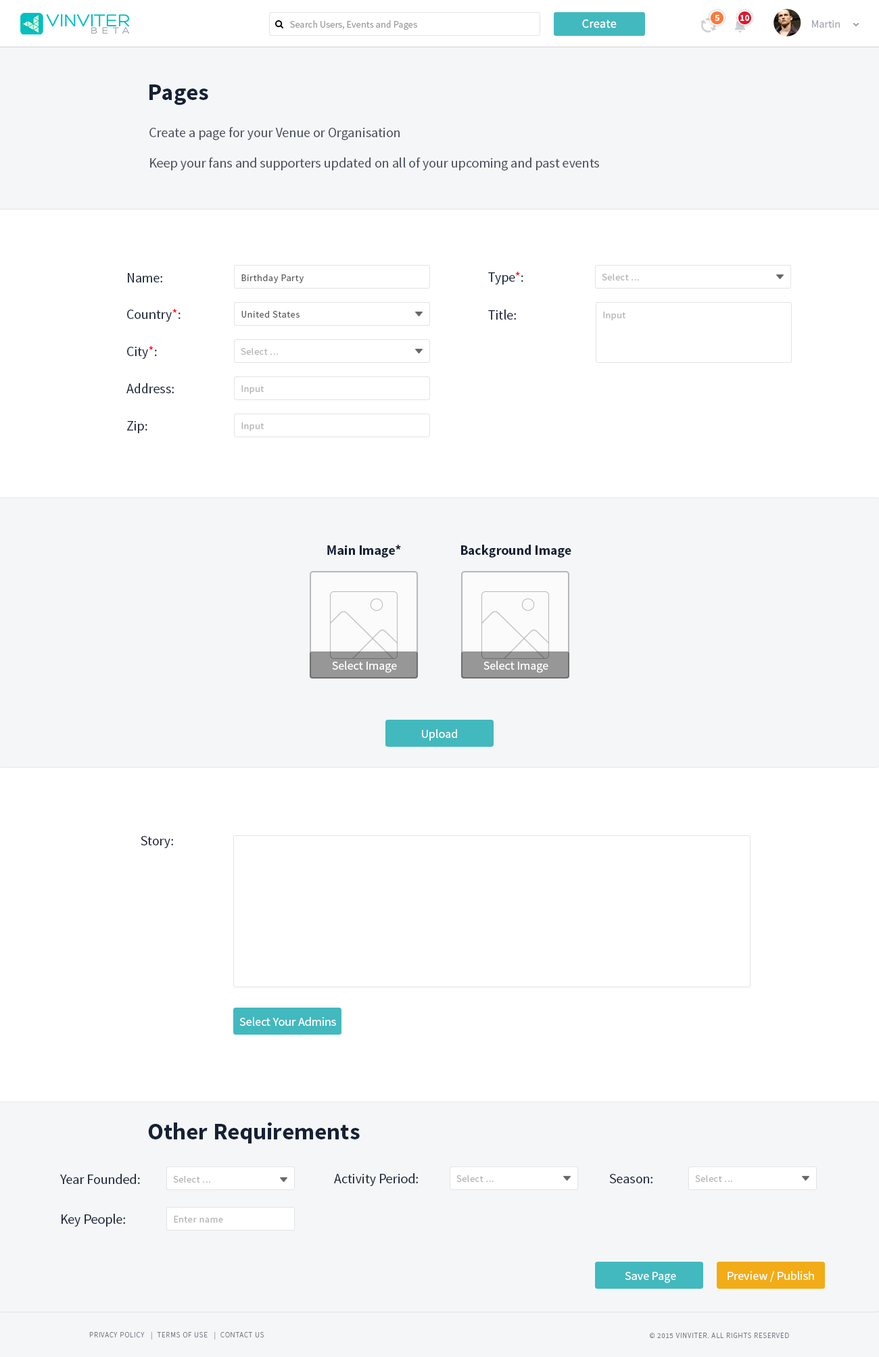
<style>
.page{position:relative;width:879px;height:1357px;background:#ffffff}
.page>*{position:absolute;margin:0}
.t1{font:8.8px "SourceSansPro-Bold";color:#ffffff}
.t2{font:9.7px "SourceSansPro-Regular";color:#999999}
.t3{font:12.2px "SourceSansPro-Regular";letter-spacing:0.02em;color:#ffffff}
.t4{font:10.8px "SourceSansPro-Regular";color:#a3a6ae}
.t5{font:23.7px "SourceSansPro-Bold";color:#162136}
.t6{font:13.5px "SourceSansPro-Regular";color:#464d5c}
.t7{font:13.5px "SourceSansPro-Regular";color:#162136}
.t8{font:9.5px "SourceSansPro-Regular";letter-spacing:0.05em;color:#585858}
.t9{font:13.5px "SourceSansPro-Regular";color:#ff0000}
.t10{font:9.5px "SourceSansPro-Regular";letter-spacing:0.05em;color:#999999}
.t11{font:13.5px "SourceSansPro-Bold";color:#162136}
.t12{font:12.2px "SourceSansPro-Regular";color:#ffffff}
.t13{font:7.4px "SourceSansPro-Light";letter-spacing:0.075em;color:#747a85;text-transform:uppercase}
</style>
<div class="page">
<p class="t1" style="left:714px;top:15px;width:5px;height:6px">5</p>
<p class="t1" style="left:740px;top:15px;width:9px;height:6px">10</p>
<p class="t2" style="left:290px;top:20px;width:127px;height:10px">Search Users, Events and Pages</p>
<p class="t3" style="left:582px;top:19px;width:34px;height:9px">Create</p>
<p class="t4" style="left:812px;top:20px;width:27px;height:8px">Martin</p>
<p class="t5" style="left:149px;top:84px;width:59px;height:21px">Pages</p>
<p class="t6" style="left:149px;top:127px;width:250px;height:14px">Create a page for your Venue or Organisation</p>
<p class="t6" style="left:150px;top:157px;width:449px;height:14px">Keep your fans and supporters updated on all of your upcoming and past events</p>
<p class="t7" style="left:128px;top:273px;width:34px;height:10px">Name:</p>
<p class="t8" style="left:241px;top:274px;width:62px;height:9px">Birthday Party</p>
<p class="t7" style="left:488px;top:272px;width:35px;height:13px">Type<span class="t9">*</span>:</p>
<p class="t10" style="left:602px;top:274px;width:37px;height:6px;opacity:0.8">Select ...</p>
<p class="t7" style="left:127px;top:309px;width:53px;height:13px">Country<span class="t9">*</span>:</p>
<p class="t8" style="left:241px;top:311px;width:58px;height:7px">United States</p>
<p class="t7" style="left:488px;top:310px;width:28px;height:10px">Title:</p>
<p class="t10" style="left:603px;top:312px;width:22px;height:8px;opacity:0.8">Input</p>
<p class="t7" style="left:127px;top:346px;width:30px;height:13px">City<span class="t9">*</span>:</p>
<p class="t10" style="left:241px;top:348px;width:37px;height:7px;opacity:0.8">Select ...</p>
<p class="t7" style="left:126px;top:383px;width:48px;height:10px">Address:</p>
<p class="t10" style="left:241px;top:385px;width:23px;height:9px;opacity:0.8">Input</p>
<p class="t7" style="left:127px;top:421px;width:20px;height:12px">Zip:</p>
<p class="t10" style="left:241px;top:422px;width:23px;height:9px;opacity:0.8">Input</p>
<p class="t11" style="left:327px;top:545px;width:74px;height:13px">Main Image*</p>
<p class="t11" style="left:461px;top:545px;width:110px;height:13px">Background Image</p>
<p class="t12" style="left:332px;top:661px;width:65px;height:12px">Select Image</p>
<p class="t12" style="left:483px;top:661px;width:65px;height:12px">Select Image</p>
<p class="t12" style="left:422px;top:729px;width:35px;height:12px">Upload</p>
<p class="t7" style="left:141px;top:836px;width:32px;height:12px">Story:</p>
<p class="t12" style="left:239px;top:1017px;width:97px;height:9px">Select Your Admins</p>
<p class="t5" style="left:148px;top:1122px;width:212px;height:22px">Other Requirements</p>
<p class="t7" style="left:60px;top:1174px;width:80px;height:10px">Year Founded:</p>
<p class="t10" style="left:173px;top:1176px;width:37px;height:7px;opacity:0.8">Select ...</p>
<p class="t7" style="left:334px;top:1173px;width:84px;height:13px">Activity Period:</p>
<p class="t10" style="left:456px;top:1175px;width:37px;height:7px;opacity:0.8">Select ...</p>
<p class="t7" style="left:609px;top:1174px;width:43px;height:9px">Season:</p>
<p class="t10" style="left:695px;top:1175px;width:37px;height:7px;opacity:0.8">Select ...</p>
<p class="t7" style="left:62px;top:1214px;width:63px;height:13px">Key People:</p>
<p class="t10" style="left:174px;top:1216px;width:49px;height:7px;opacity:0.8">Enter name</p>
<p class="t12" style="left:625px;top:1272px;width:51px;height:11px">Save Page</p>
<p class="t12" style="left:727px;top:1271px;width:87px;height:11px">Preview / Publish</p>
<p class="t13" style="left:89px;top:1331px;width:175px;height:9px">Privacy Policy   |  Terms of Use   |  Contact us</p>
<p class="t13" style="left:649px;top:1333px;width:140px;height:5px">© 2015 VINVITER. All rights reserved</p>
</div>
